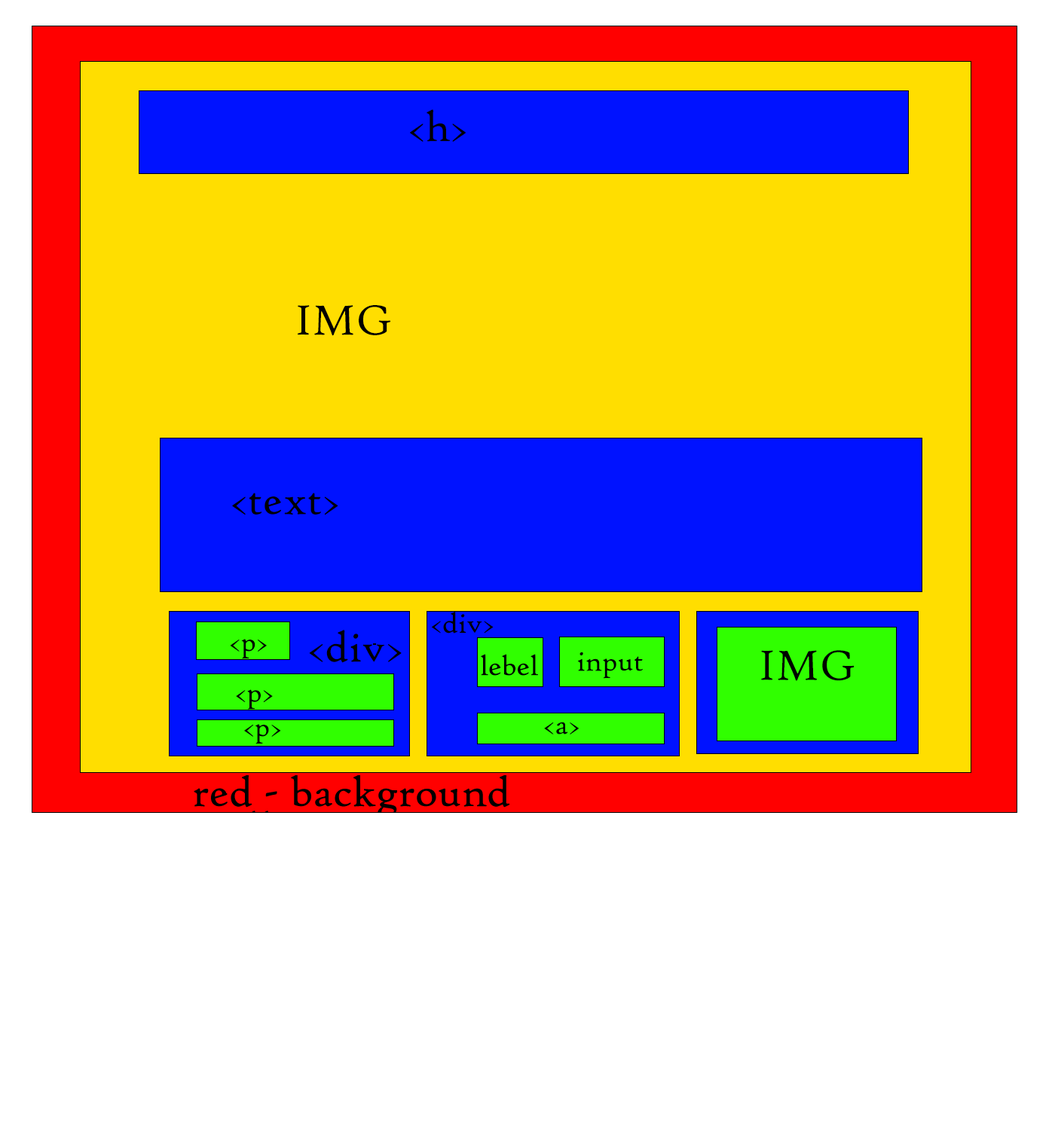
<style>
.page{position:relative;width:1055px;height:1130px;background:#ffffff}
.page>*{position:absolute;margin:0}
.t1{font:45.2px "HighTowerText-Reg";color:#000000}
.t2{font:30.1px "HighTowerText-Reg";color:#000000}
</style>
<div class="page">
<p class="t1" style="left:410px;top:109px;width:56px;height:33px">&lt;h&gt;</p>
<p class="t1" style="left:298px;top:305px;width:92px;height:31px">IMG</p>
<p class="t1" style="left:232px;top:493px;width:106px;height:22px">&lt;text&gt;</p>
<p class="t2" style="left:432px;top:612px;width:62px;height:22px">&lt;div&gt;</p>
<p class="t1" style="left:309px;top:630px;width:93px;height:33px">&lt;div&gt;</p>
<p class="t2" style="left:230px;top:639px;width:37px;height:20px">&lt;p&gt;</p>
<p class="t2" style="left:578px;top:652px;width:65px;height:27px">input</p>
<p class="t1" style="left:761px;top:650px;width:94px;height:31px">IMG</p>
<p class="t2" style="left:481px;top:654px;width:57px;height:22px">lebel</p>
<p class="t2" style="left:236px;top:689px;width:37px;height:21px">&lt;p&gt;</p>
<p class="t2" style="left:244px;top:724px;width:37px;height:20px">&lt;p&gt;</p>
<p class="t2" style="left:544px;top:722px;width:35px;height:13px">&lt;a&gt;</p>
</div>
